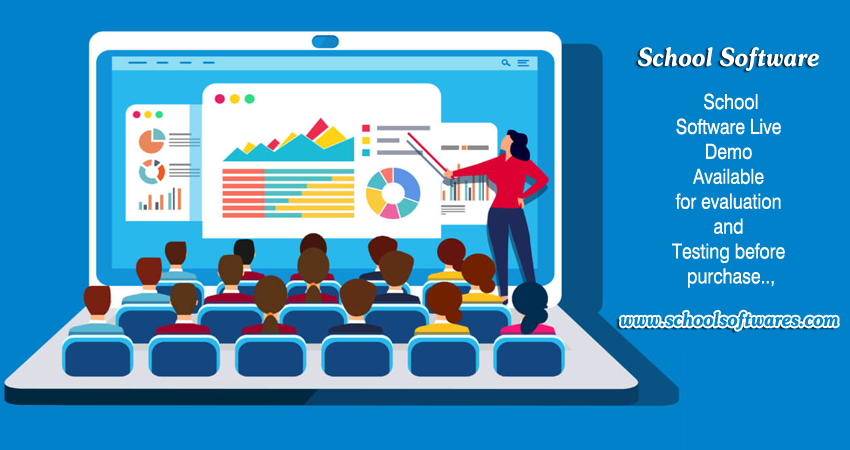
<style>
.page{position:relative;width:850px;height:450px;background:#0181ca}
.page>*{position:absolute;margin:0}
.t1{font:24.9px "AGSouCyrillic-BoldItalic";color:#ffffff;scale:0.85 1}
.t2{font:20.8px "Swiss721BT-Roman";color:#ffffff;scale:0.85 1}
.t3{font:18.7px "AGSouCyrillic-BoldItalic";color:#0181ca;scale:0.85 1}
</style>
<div class="page">
<p class="t1" style="left:637px;top:47px;width:182px;height:24px">School Software</p>
<p class="t2" style="left:672px;top:93px;width:113px;height:195px;text-align:center">School<br>Software Live <br>Demo <br>Available <br>for evaluation <br>and <br>Testing before <br>purchase..,</p>
<p class="t3" style="left:620px;top:311px;width:218px;height:19px">www.schoolsoftwares.com</p>
</div>
